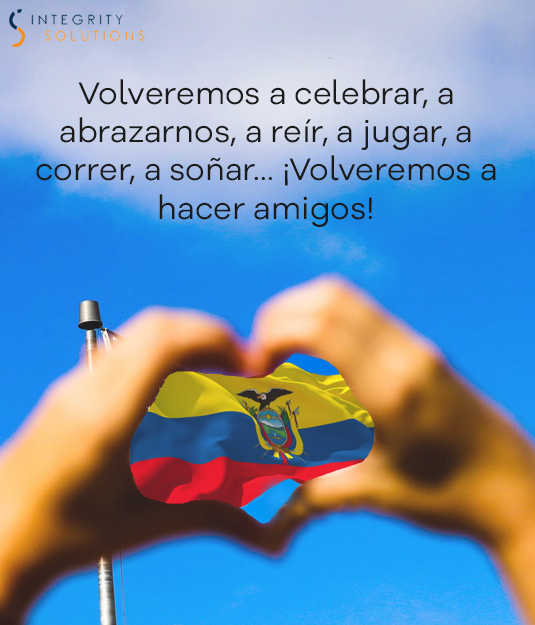
<style>
.page{position:relative;width:535px;height:625px}
.page>*{position:absolute;margin:0}
.t1{font:32px "GalanoGrotesqueAlt-Regular";color:#1b1b1b}
</style>
<div class="page">
<p class="t1" style="left:36px;top:79px;width:460px;height:148px;text-align:center">Volveremos a celebrar, a abrazarnos, a reír, a jugar, a correr, a soñar… ¡Volveremos a hacer amigos!</p>
</div>
